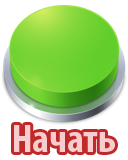
<style>
.page{position:relative;width:128px;height:160px;background:#ffffff}
.page>*{position:absolute;margin:0}
.t1{font:40px "MyriadPro-BoldCond";color:#f9cdcf}
</style>
<div class="page">
<p class="t1" style="left:14px;top:125px;width:101px;height:27px">Начать</p>
</div>
